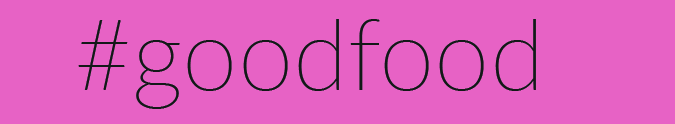
<style>
.page{position:relative;width:675px;height:124px;background:#e762c5}
.page>*{position:absolute;margin:0}
.t1{font:100px "Lato-Thin";color:#141819}
</style>
<div class="page">
<p class="t1" style="left:78px;top:19px;width:458px;height:90px">#goodfood</p>
</div>
